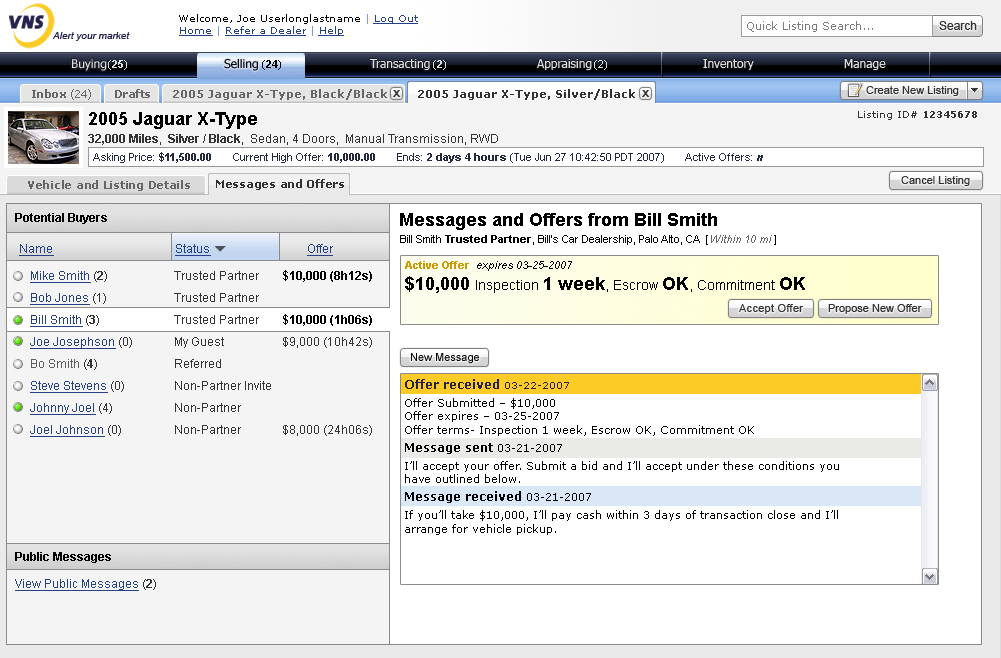
<style>
.page{position:relative;width:1001px;height:658px;background:#ffffff}
.page>*{position:absolute;margin:0}
.t1{font:10px "Verdana";color:#010101}
.t2{font:10px "Verdana";color:#7f9ada}
.t3{font:10px "Verdana";color:#254085;text-decoration:underline}
.t4{font:11px "Verdana";color:#7c7c7c}
.t5{font:12px "ArialMT";color:#333333}
.t6{font:10px "Arial-ItalicMT";color:#24214f}
.t7{font:12px "Tahoma";color:#dededc}
.t8{font:11px "Arial-BoldMT";color:#dededc}
.t9{font:11px "ArialMT";color:#dededc}
.t10{font:12px "Tahoma";color:#010101}
.t11{font:11px "Arial-BoldMT";color:#010101}
.t12{font:11px "ArialMT";color:#010101}
.t13{font:11px "Verdana-Bold";letter-spacing:-0.05em;color:#666666}
.t14{font:11px "Verdana";letter-spacing:-0.05em;color:#666666}
.t15{font:11px "Verdana-Bold";color:#666666}
.t16{font:11px "Verdana-Bold";color:#323232}
.t17{font:11px "ArialMT";color:#333333}
.t18{font:10px "Arial-BoldMT";color:#333333;scale:1.1 1}
.t19{font:12px/18px "ArialMT";color:#333333}
.t20{font:18px/18px "Arial-BoldMT";color:#000000}
.t21{font:12px/18px "Arial-BoldMT";color:#333333}
.t22{font:10px "Verdana";color:#333333}
.t23{font:10px "Verdana-Bold";color:#333333}
.t24{font:11px "ArialMT";color:#22293d}
.t25{font:11px "Arial-BoldMT";color:#22293d}
.t26{font:11px "Arial-BoldItalicMT";color:#22293d}
.t27{font:11px "Verdana-Bold";letter-spacing:-0.025em;color:#666666}
.t28{font:11px "Verdana-Bold";letter-spacing:-0.025em;color:#323232}
.t29{font:12px "Arial-BoldMT";color:#000000}
.t30{font:18px "Arial-BoldMT";color:#000000}
.t31{font:12px "ArialMT";color:#254085;text-decoration:underline}
.t32{font:11px "ArialMT";color:#000000}
.t33{font:11px "Arial-BoldMT";color:#000000}
.t34{font:11px "Arial-ItalicMT";color:#666666}
.t35{font:12px/22px "ArialMT";color:#333333}
.t36{font:12px/22px "ArialMT";color:#254085;text-decoration:underline}
.t37{font:12px/22px "Arial-BoldMT";color:#333333}
.t38{font:12px/22px "Arial-BoldMT";color:#000000}
.t39{font:12px/22px "ArialMT";color:#5d5d5d}
.t40{font:11px "Arial-ItalicMT";color:#000000}
.t41{font:11px "Arial-BoldMT";color:#cc9900}
.t42{font:14px "ArialMT";color:#000000}
.t43{font:11px "ArialMT";letter-spacing:0.025em;color:#333333}
.t44{font:11px/18px "Verdana";color:#000000}
.t45{font:12px/18px "Verdana-Bold";color:#24214f}
.t46{font:10px/18px "Verdana";color:#24214f}
.t47{font:11px "Verdana";color:#000000}
.t48{font:12px/18px "Verdana-Bold";color:#000000}
.t49{font:11px/14px "Verdana";color:#000000}
.t50{font:12px "Arial-BoldMT";color:#333333}
</style>
<div class="page">
<p class="t1" style="left:179px;top:14px;width:239px;height:10px">Welcome, Joe Userlonglastname<span class="t2"> | </span><span class="t3">Log Out</span></p>
<p class="t3" style="left:179px;top:26px;width:165px;height:10px">Home <span class="t2">| </span>Refer a Dealer <span class="t2">| </span>Help</p>
<p class="t4" style="left:747px;top:21px;width:126px;height:11px">Quick Listing Search...</p>
<p class="t5" style="left:939px;top:21px;width:38px;height:9px">Search</p>
<p class="t6" style="left:52px;top:32px;width:78px;height:9px">Alert your market</p>
<p class="t7" style="left:72px;top:59px;width:35px;height:12px">Buying</p>
<p class="t8" style="left:108px;top:60px;width:19px;height:10px"><span class="t9"> (</span>25<span class="t9">)</span></p>
<p class="t10" style="left:224px;top:59px;width:34px;height:12px">Selling</p>
<p class="t11" style="left:262px;top:60px;width:19px;height:10px"><span class="t12"> (</span>24<span class="t12">)</span></p>
<p class="t7" style="left:369px;top:59px;width:61px;height:11px">Transacting</p>
<p class="t9" style="left:433px;top:60px;width:13px;height:10px">(<span class="t8">2</span>)</p>
<p class="t7" style="left:537px;top:59px;width:55px;height:11px">Appraising</p>
<p class="t9" style="left:594px;top:60px;width:13px;height:10px">(2)</p>
<p class="t7" style="left:703px;top:59px;width:51px;height:11px">Inventory</p>
<p class="t7" style="left:844px;top:59px;width:42px;height:11px">Manage</p>
<p class="t13" style="left:32px;top:89px;width:59px;height:11px">Inbox <span class="t14">(24)</span></p>
<p class="t13" style="left:115px;top:89px;width:35px;height:9px">Drafts</p>
<p class="t15" style="left:173px;top:89px;width:214px;height:11px">2005 Jaguar X-Type, Black/Black</p>
<p class="t16" style="left:418px;top:89px;width:217px;height:11px">2005 Jaguar X-Type, Silver/Black</p>
<p class="t17" style="left:866px;top:86px;width:93px;height:10px">Create New Listing</p>
<p class="t18" style="left:393px;top:90px;width:8px;height:7px">X</p>
<p class="t18" style="left:642px;top:90px;width:8px;height:7px">X</p>
<p class="t19" style="left:88px;top:112px;width:410px;height:33px"><span class="t20">2005 Jaguar X-Type <br></span><span class="t21">32,000 Miles</span>,  <span class="t21">Silver / Black</span>,  Sedan, 4 Doors,  Manual Transmission, RWD</p>
<p class="t22" style="left:858px;top:111px;width:119px;height:9px">Listing ID# <span class="t23">12345678</span></p>
<p class="t24" style="left:93px;top:152px;width:670px;height:11px">Asking Price: <span class="t25">$11,500.00       </span>Current High Offer: <span class="t25">10,000.00       </span>Ends:<span class="t25"> 2 days 4 hours </span>(Tue Jun 27 10:42:50 PDT 2007)       Active Offers: <span class="t26">n</span></p>
<p class="t27" style="left:28px;top:180px;width:162px;height:11px">Vehicle and Listing Details</p>
<p class="t28" style="left:216px;top:179px;width:128px;height:11px">Messages and Offers</p>
<p class="t17" style="left:901px;top:176px;width:69px;height:10px">Cancel Listing</p>
<p class="t29" style="left:15px;top:213px;width:92px;height:11px">Potential Buyers</p>
<p class="t30" style="left:400px;top:213px;width:317px;height:17px">Messages and Offers from Bill Smith</p>
<p class="t30" style="left:400px;top:213px;width:317px;height:17px">Messages and Offers from Bill Smith</p>
<p class="t31" style="left:19px;top:244px;width:314px;height:12px">Name        Status   Offer</p>
<p class="t32" style="left:400px;top:235px;width:376px;height:10px">Bill Smith <span class="t33">Trusted Partner</span>, Bill’s Car Dealership, Palo Alto, CA  [<span class="t34">Within 10 mi</span> ]</p>
<p class="t35" style="left:30px;top:270px;width:342px;height:167px"><span class="t36">Mike Smith</span> (<span class="t37">2</span>)   Trusted Partner  <span class="t38">$10,000 (8h12s)<br></span><span class="t36">Bob Jones</span> (1)   Trusted Partner<br><span class="t36">Bill Smith</span> (<span class="t37">3</span>)   Trusted Partner  <span class="t38">$10,000 (1h06s)<br></span><span class="t36">Joe Josephson</span> (0)   My Guest   $9,000 (10h42s)<br><span class="t39">Bo Smith</span> (<span class="t37">4</span>)    Referred<br><span class="t36">Steve Stevens</span> (0)   Non-Partner Invite<br><span class="t36">Johnny Joel</span> (4)   Non-Partner<br><span class="t36">Joel Johnson</span> (0)   Non-Partner   $8,000 (24h06s)</p>
<p class="t40" style="left:405px;top:261px;width:400px;height:32px"><span class="t41">Active Offer  </span>expires 03-25-2007<br><span class="t30">$10,000 </span><span class="t42">Inspection </span><span class="t30">1 week</span><span class="t42">, Escrow </span><span class="t30">OK</span><span class="t42">, Commitment </span><span class="t30">OK</span></p>
<p class="t43" style="left:739px;top:304px;width:65px;height:10px">Accept Offer</p>
<p class="t17" style="left:828px;top:304px;width:94px;height:10px">Propose New Offer</p>
<p class="t32" style="left:411px;top:353px;width:68px;height:11px">New Message</p>
<p class="t44" style="left:405px;top:379px;width:434px;height:156px"><span class="t45">Offer received </span><span class="t46">03-22-2007<br></span>Offer Submitted – $10,000<br><span class="t47">Offer expires – 03-25-2007<br>Offer terms- Inspection 1 week, Escrow OK, Commitment OK<br></span><span class="t48">Message sent </span>03-21-2007<br>I’ll accept your offer. Submit a bid and I’ll accept under these conditions you<br><span class="t47">have outlined below. <br></span><span class="t48">Message received </span>03-21-2007<br>If you’ll take $10,000, I’ll pay cash within 3 days of transaction close and I’ll<br><span class="t49">arrange for vehicle pickup.</span></p>
<p class="t29" style="left:15px;top:552px;width:96px;height:11px">Public Messages</p>
<p class="t31" style="left:15px;top:579px;width:141px;height:12px">View Public Messages<span class="t5"> (</span><span class="t50">2</span><span class="t5">)</span></p>
</div>
